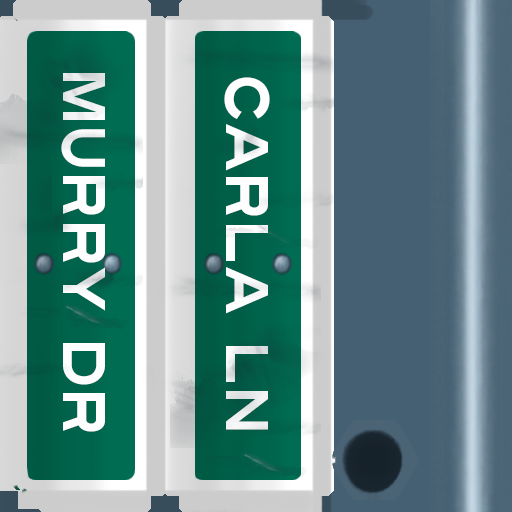
<style>
.page{position:relative;width:512px;height:512px}
.page>*{position:absolute;margin:0}
.t1{font:60px "Turnpike";color:#fefeff;scale:0.75 1}
</style>
<div class="page">
<p class="t1" style="left:61px;top:73px;width:44px;height:359px;rotate:90deg">Murry Dr</p>
<p class="t1" style="left:224px;top:77px;width:46px;height:353px;rotate:90deg">Carla Ln</p>
</div>
